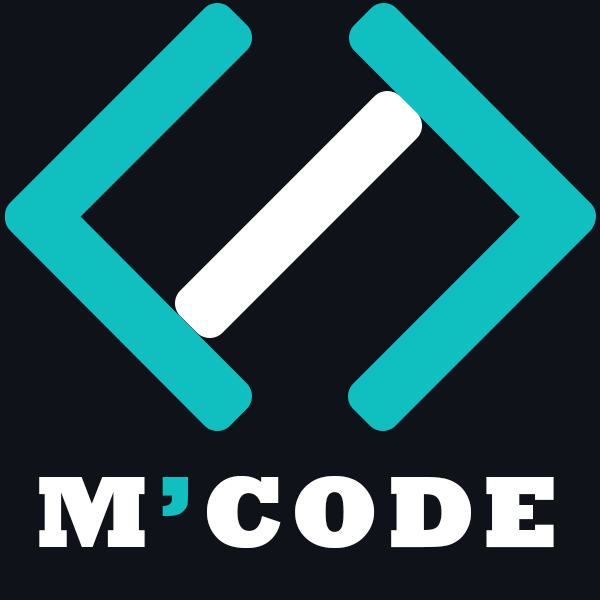
<style>
.page{position:relative;width:600px;height:600px;background:#0f1319}
.page>*{position:absolute;margin:0}
.t1{font:102.9px "Rockwell-ExtraBold";letter-spacing:0.06em;color:#ffffff}
.t2{font:102.9px "Rockwell-ExtraBold";letter-spacing:0.06em;color:#10c0c0}
</style>
<div class="page">
<p class="t1" style="left:39px;top:476px;width:515px;height:72px">M<span class="t2">’</span>CODE</p>
</div>
